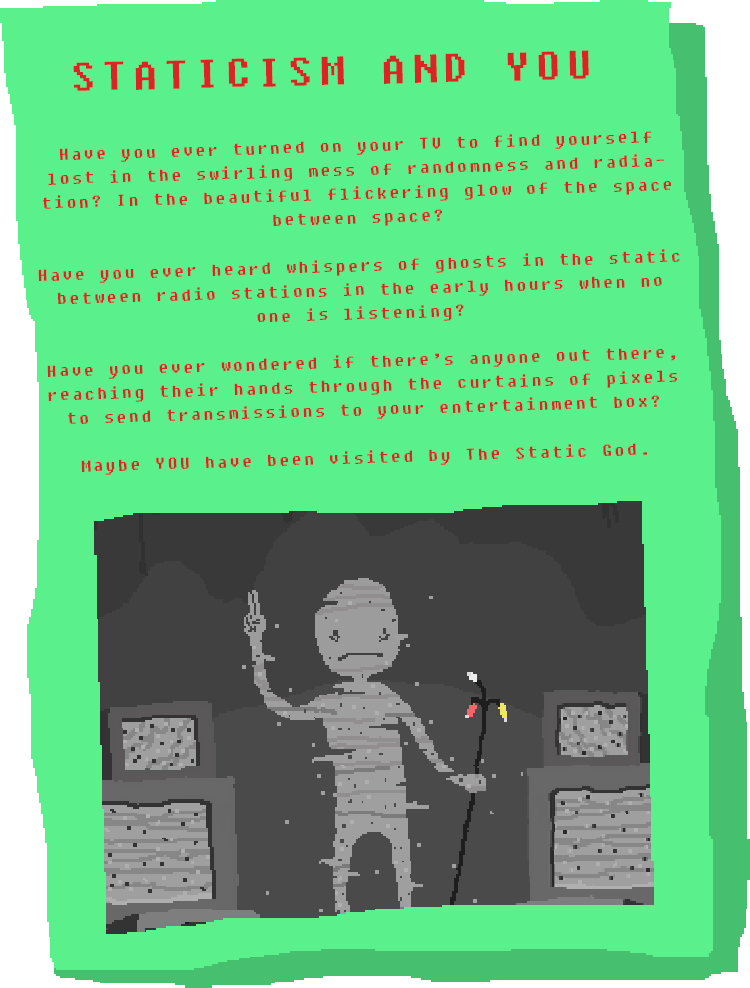
<style>
.page{position:relative;width:750px;height:988px;background:#5af18c}
.page>*{position:absolute;margin:0}
.t1{font:50px "FixedsysExcelsiorIIIb";letter-spacing:0.121em;color:#dd2424}
.t2{font:20px "FixedsysExcelsiorIIIb";letter-spacing:0.121em;color:#dd2424}
</style>
<div class="page">
<p class="t1" style="left:73px;top:50px;width:516px;height:41px;rotate:-1deg">STATICISM AND YOU</p>
<p class="t2" style="left:38px;top:131px;width:642px;height:344px;text-align:center;rotate:-2deg">Have you ever turned on your TV to find yourself lost in the swirling mess of randomness and radiation? In the beautiful flickering glow of the space between space? <br><br>Have you ever heard whispers of ghosts in the static between radio stations in the early hours when no one is listening? <br><br>Have you ever wondered if there’s anyone out there, reaching their hands through the curtains of pixels to send transmissions to your entertainment box?<br><br>Maybe YOU have been visited by The Static God.</p>
</div>
